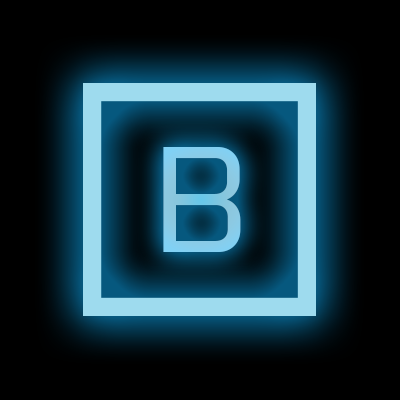
<style>
.page{position:relative;width:400px;height:400px;background:#000000}
.page>*{position:absolute;margin:0}
.t1{font:150px "Purista";color:#80d1f5}
</style>
<div class="page">
<p class="t1" style="left:163px;top:147px;width:78px;height:105px">B</p>
</div>
